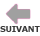
<style>
.page{position:relative;width:40px;height:36px;background:#ffffff}
.page>*{position:absolute;margin:0}
.t1{font:8px "Verdana-Bold";letter-spacing:-0.025em;color:#393939}
</style>
<div class="page">
<p class="t1" style="left:0px;top:26px;width:40px;height:6px">SUIVANT</p>
</div>
